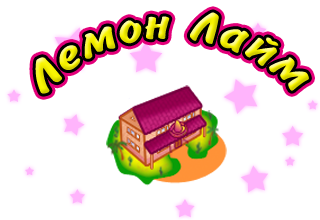
<style>
.page{position:relative;width:320px;height:220px;background:#ffffff}
.page>*{position:absolute;margin:0}
.t1{font:48px/32.1px "BrushType-Bold";letter-spacing:0.05em;font-style:italic}
</style>
<div class="page">
<p class="t1" style="left:35px;top:12px;width:274px;height:82px;text-align:right">Ëåìîí Ëàéì</p>
</div>
